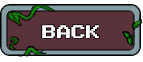
<style>
.page{position:relative;width:143px;height:62px;background:#59323a}
.page>*{position:absolute;margin:0}
.t1{font:14.6px "PublicPixel";color:#ffffff;text-transform:uppercase}
</style>
<div class="page">
<p class="t1" style="left:42px;top:25px;width:57px;height:13px">back</p>
</div>
